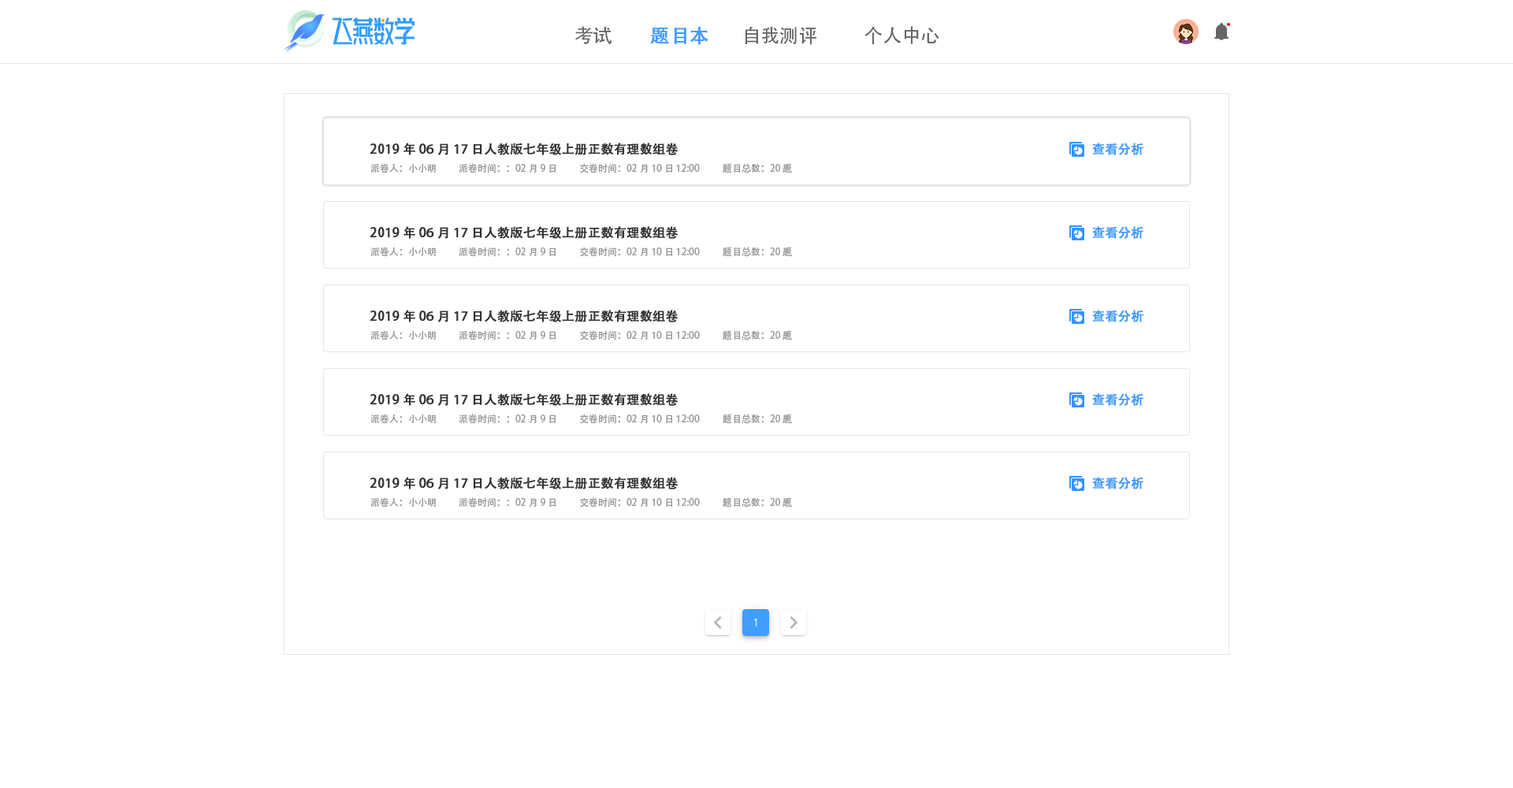
<style>
.page{position:relative;width:1513px;height:788px;background:#ffffff}
.page>*{position:absolute;margin:0}
.t1{font:18.9px "AdobeHeitiStd-Regular";color:#666666}
.t2{font:18.9px "AdobeHeitiStd-Regular";color:#409eff;font-weight:bold}
.t3{font:12.6px "AdobeHeitiStd-Regular";color:#333333;font-weight:bold}
.t4{font:12.6px "AdobeHeitiStd-Regular";color:#409eff;font-weight:bold}
.t5{font:9.5px "AdobeHeitiStd-Regular";color:#999999}
</style>
<div class="page">
<p class="t1" style="left:575px;top:26px;width:37px;height:18px">考试</p>
<p class="t2" style="left:650px;top:27px;width:58px;height:18px">题目本</p>
<p class="t1" style="left:745px;top:26px;width:71px;height:19px">自我测评</p>
<p class="t1" style="left:865px;top:26px;width:74px;height:18px">个人中心</p>
<p class="t3" style="left:370px;top:143px;width:309px;height:12px">2019年06月17日人教版七年级上册正数有理数组卷</p>
<p class="t4" style="left:1092px;top:143px;width:51px;height:12px">查看分析</p>
<p class="t5" style="left:370px;top:163px;width:66px;height:10px">派卷人：小小明</p>
<p class="t5" style="left:459px;top:163px;width:97px;height:10px">派卷时间：：02月9日</p>
<p class="t5" style="left:580px;top:163px;width:120px;height:10px">交卷时间：02月10日 12:00</p>
<p class="t5" style="left:723px;top:163px;width:70px;height:10px">题目总数：20题</p>
<p class="t3" style="left:370px;top:226px;width:309px;height:13px">2019年06月17日人教版七年级上册正数有理数组卷</p>
<p class="t4" style="left:1092px;top:226px;width:51px;height:13px">查看分析</p>
<p class="t5" style="left:370px;top:247px;width:66px;height:9px">派卷人：小小明</p>
<p class="t5" style="left:459px;top:247px;width:97px;height:10px">派卷时间：：02月9日</p>
<p class="t5" style="left:580px;top:247px;width:120px;height:10px">交卷时间：02月10日 12:00</p>
<p class="t5" style="left:723px;top:247px;width:70px;height:10px">题目总数：20题</p>
<p class="t3" style="left:370px;top:310px;width:309px;height:12px">2019年06月17日人教版七年级上册正数有理数组卷</p>
<p class="t4" style="left:1092px;top:310px;width:51px;height:12px">查看分析</p>
<p class="t5" style="left:370px;top:330px;width:66px;height:10px">派卷人：小小明</p>
<p class="t5" style="left:459px;top:330px;width:97px;height:10px">派卷时间：：02月9日</p>
<p class="t5" style="left:580px;top:330px;width:120px;height:10px">交卷时间：02月10日 12:00</p>
<p class="t5" style="left:723px;top:330px;width:70px;height:10px">题目总数：20题</p>
<p class="t3" style="left:370px;top:393px;width:309px;height:13px">2019年06月17日人教版七年级上册正数有理数组卷</p>
<p class="t4" style="left:1092px;top:393px;width:51px;height:13px">查看分析</p>
<p class="t5" style="left:370px;top:414px;width:66px;height:9px">派卷人：小小明</p>
<p class="t5" style="left:459px;top:414px;width:97px;height:10px">派卷时间：：02月9日</p>
<p class="t5" style="left:580px;top:414px;width:120px;height:10px">交卷时间：02月10日 12:00</p>
<p class="t5" style="left:723px;top:414px;width:70px;height:10px">题目总数：20题</p>
<p class="t3" style="left:370px;top:477px;width:309px;height:12px">2019年06月17日人教版七年级上册正数有理数组卷</p>
<p class="t4" style="left:1092px;top:477px;width:51px;height:12px">查看分析</p>
<p class="t5" style="left:370px;top:497px;width:66px;height:10px">派卷人：小小明</p>
<p class="t5" style="left:459px;top:497px;width:97px;height:11px">派卷时间：：02月9日</p>
<p class="t5" style="left:580px;top:497px;width:120px;height:11px">交卷时间：02月10日 12:00</p>
<p class="t5" style="left:723px;top:497px;width:70px;height:11px">题目总数：20题</p>
</div>
